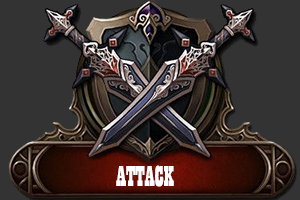
<style>
.page{position:relative;width:300px;height:200px;background:#333333}
.page>*{position:absolute;margin:0}
.t1{font:30px "Playbill";color:#ffffff}
</style>
<div class="page">
<p class="t1" style="left:116px;top:165px;width:58px;height:22px">ATTACK</p>
</div>
